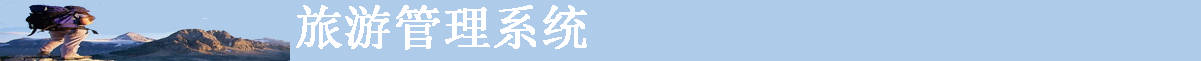
<style>
.page{position:relative;width:1201px;height:61px;background:#aecbea}
.page>*{position:absolute;margin:0}
.t1{font:48px "SimSun";color:#ffffff;font-weight:bold}
</style>
<div class="page">
<p class="t1" style="left:296px;top:5px;width:291px;height:45px">旅游管理系统</p>
</div>
